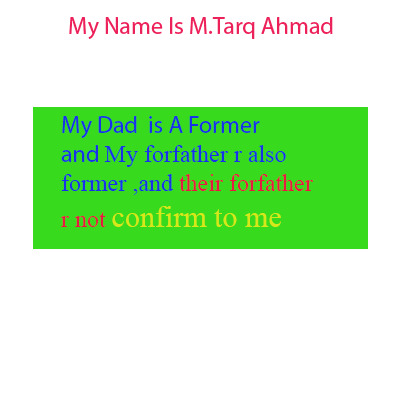
<style>
.page{position:relative;width:400px;height:400px;background:#ffffff}
.page>*{position:absolute;margin:0}
.t1{font:24px "TimesNewRomanPSMT";color:#1a32e7}
.t2{font:24px "MyriadPro-Regular";color:#1a32e7}
.t3{font:24px "TimesNewRomanPSMT";color:#e71a41}
.t4{font:30px "TimesNewRomanPSMT";color:#d6e71a}
</style>
<div class="page">
<p class="t1" style="left:61px;top:116px;width:252px;height:111px"><span class="t2">My Dad  is A Former <br>and </span>My forfather r also<br>former ,and <span class="t3">their forfather <br>r not </span><span class="t4">confirm to me</span></p>
</div>
